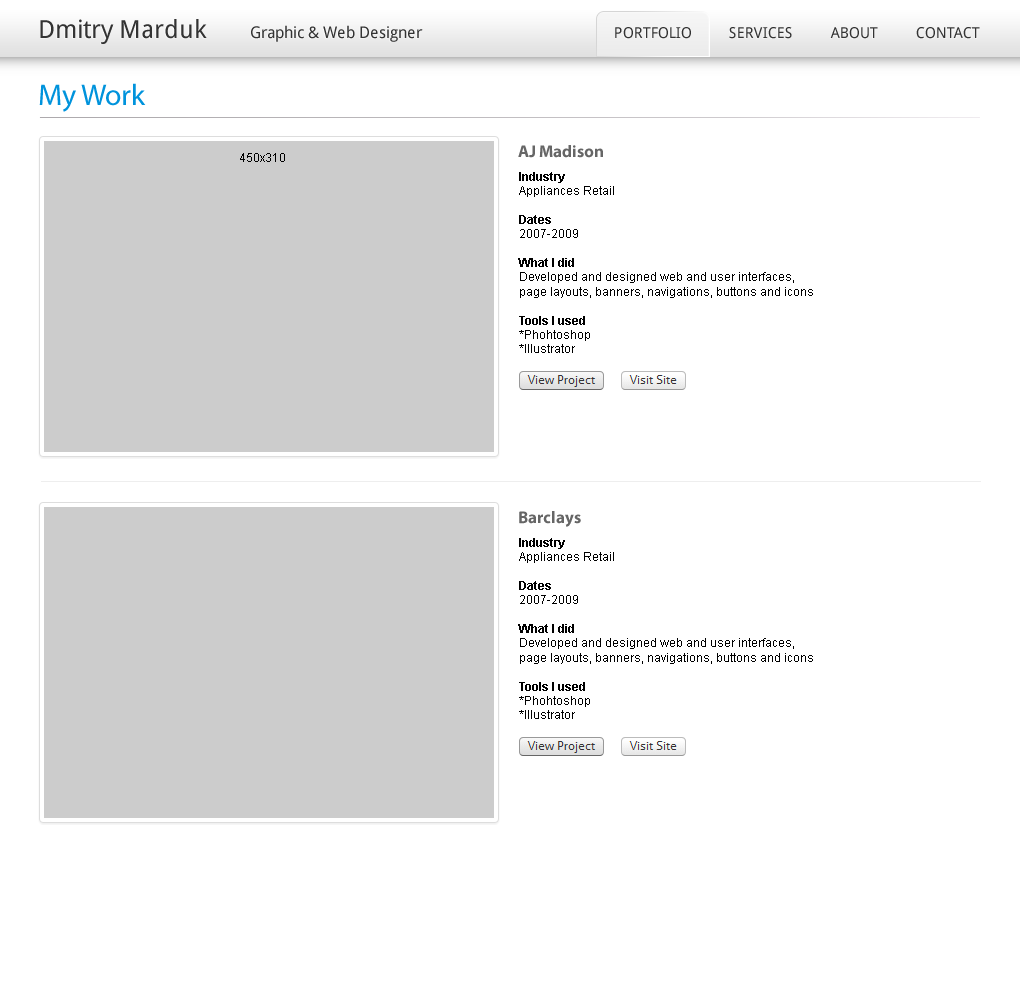
<style>
.page{position:relative;width:1020px;height:1000px;background:#ffffff}
.page>*{position:absolute;margin:0}
.t1{font:30px "MyriadPro-Regular";color:#0093dc}
.t2{font:17px "MyriadPro-Bold";color:#666666}
.t3{font:12px "ArialMT";color:#000000}
.t4{font:12px "Arial-BoldMT";color:#000000}
</style>
<div class="page">
<p class="t1" style="left:39px;top:83px;width:107px;height:29px">My Work</p>
<p class="t2" style="left:518px;top:145px;width:85px;height:13px">AJ Madison</p>
<p class="t3" style="left:240px;top:153px;width:45px;height:9px">450x310</p>
<p class="t3" style="left:518px;top:172px;width:295px;height:181px"><span class="t4">Industry<br></span>Appliances Retail<br><br><span class="t4">Dates<br></span>2007-2009<br><br><span class="t4">What I did<br></span>Developed and designed web and user interfaces, page layouts, banners, navigations, buttons and icons <br><br><span class="t4">Tools I used<br></span>*Phohtoshop<br>*Illustrator</p>
<p class="t2" style="left:519px;top:511px;width:62px;height:16px">Barclays</p>
<p class="t3" style="left:518px;top:538px;width:295px;height:181px"><span class="t4">Industry<br></span>Appliances Retail<br><br><span class="t4">Dates<br></span>2007-2009<br><br><span class="t4">What I did<br></span>Developed and designed web and user interfaces, page layouts, banners, navigations, buttons and icons <br><br><span class="t4">Tools I used<br></span>*Phohtoshop<br>*Illustrator</p>
</div>
